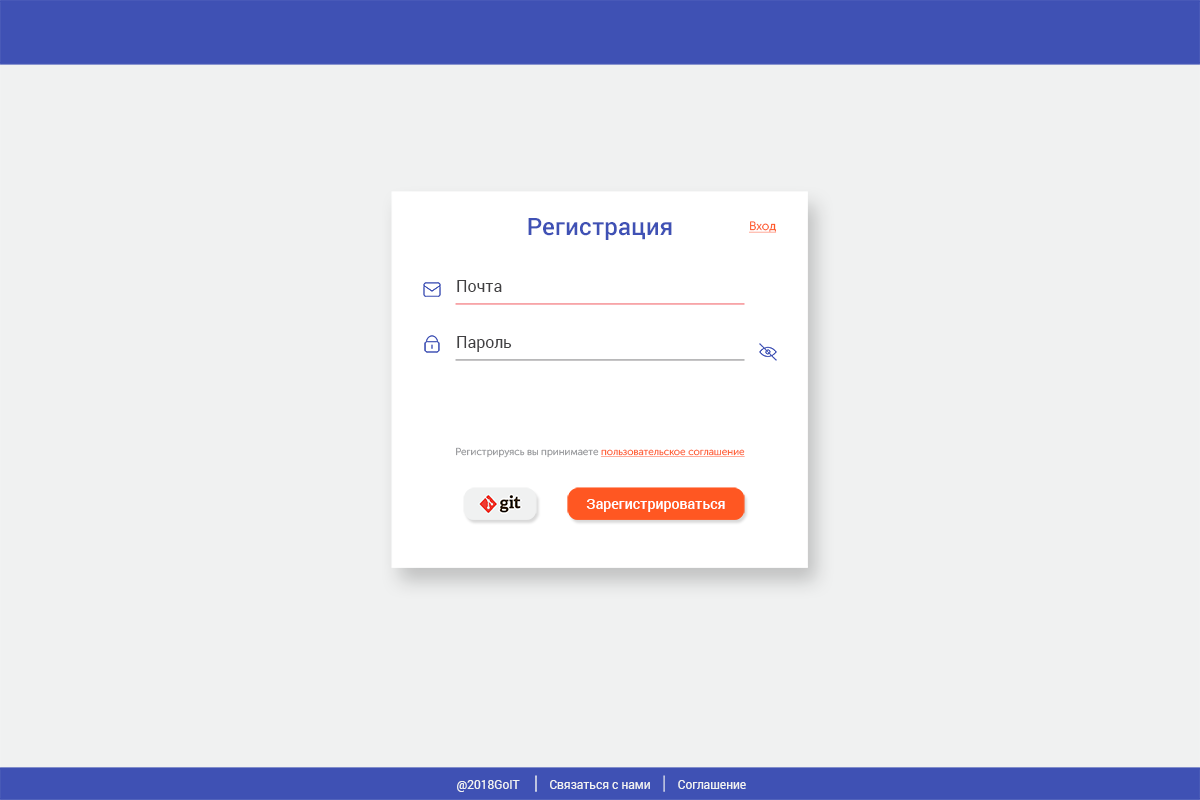
<style>
.page{position:relative;width:1200px;height:800px;background:#f0f1f1}
.page>*{position:absolute;margin:0}
.t1{font:24px "Roboto-Medium";color:#3f51b5}
.t2{font:12px "MuseoSansCyrl-300";color:#ff5722;text-decoration:underline}
.t3{font:16px "Roboto-Regular";color:#414042}
.t4{font:10px "MuseoSansCyrl-300"}
.t5{font:10px "MuseoSansCyrl-300";text-decoration:underline}
.t6{font:14px "Roboto-Medium";letter-spacing:0.005em;color:#ffffff}
.t7{font:12px "Roboto-Regular";color:#f1f2f2}
</style>
<div class="page">
<p class="t1" style="left:528px;top:218px;width:144px;height:22px">Регистрация</p>
<p class="t2" style="left:749px;top:221px;width:28px;height:12px">Вход</p>
<p class="t3" style="left:457px;top:280px;width:45px;height:12px">Почта</p>
<p class="t3" style="left:457px;top:336px;width:55px;height:16px">Пароль</p>
<p class="t4" style="left:456px;top:447px;width:289px;height:11px">Регистрируясь вы принимаете <span class="t5">пользовательское соглашение</span></p>
<p class="t6" style="left:586px;top:499px;width:139px;height:13px">Зарегистрироваться</p>
<p class="t7" style="left:457px;top:780px;width:63px;height:12px">@2018GoIT</p>
<p class="t7" style="left:550px;top:780px;width:100px;height:9px">Связаться с нами</p>
<p class="t7" style="left:678px;top:780px;width:68px;height:9px">Соглашение</p>
</div>
